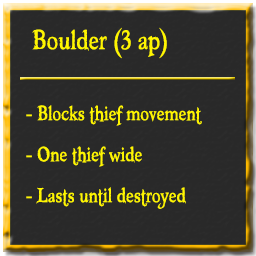
<style>
.page{position:relative;width:256px;height:256px;background:#292929}
.page>*{position:absolute;margin:0}
.t1{font:40px "Booter-ZeroZero";color:#fff600}
.t2{font:30px "Booter-ZeroZero";color:#fff600}
</style>
<div class="page">
<p class="t1" style="left:32px;top:27px;width:135px;height:32px">Boulder (3 ap)</p>
<p class="t2" style="left:26px;top:105px;width:176px;height:21px">- Blocks thief movement</p>
<p class="t2" style="left:26px;top:146px;width:116px;height:21px">- One thief wide</p>
<p class="t2" style="left:26px;top:187px;width:160px;height:22px">- Lasts until destroyed</p>
</div>
